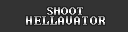
<style>
.page{position:relative;width:128px;height:32px;background:#333333}
.page>*{position:absolute;margin:0}
.t1{font:14px "Terminal"}
</style>
<div class="page">
<p class="t1" style="left:26px;top:16px;width:79px;height:9px">HELLAVATOR</p>
</div>
